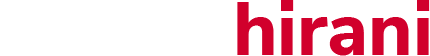
<style>
.page{position:relative;width:430px;height:56px;background:#ffffff}
.page>*{position:absolute;margin:0}
.t1{font:75px "NunitoSans-ExtraBold";color:#d1002c}
.t2{font:75px "NunitoSans-ExtraBold";color:#ffffff}
</style>
<div class="page">
<p class="t1" style="left:0px;top:0px;width:430px;height:56px"><span class="t2">femas </span>hirani</p>
</div>
